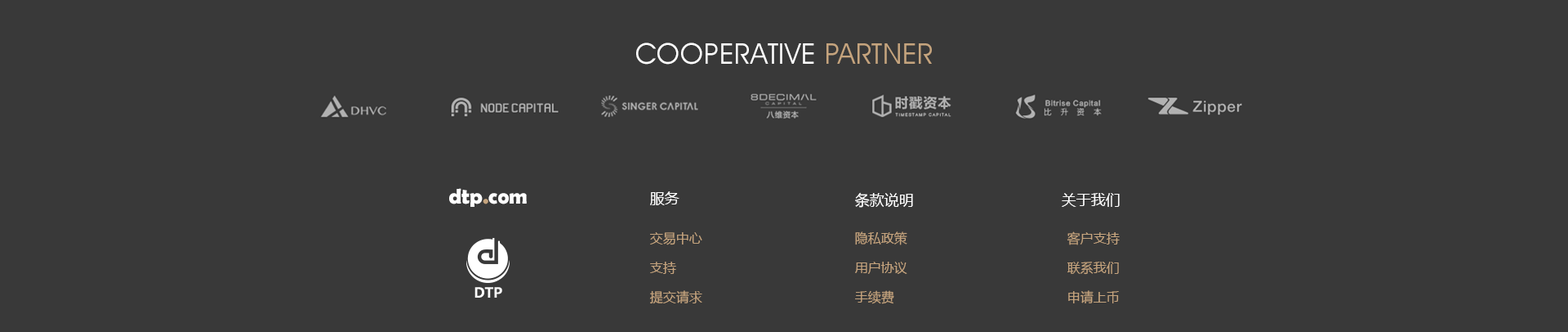
<style>
.page{position:relative;width:1568px;height:332px;background:#393939}
.page>*{position:absolute;margin:0}
.t1{font:28.6px "AvantGardeITCbyBT-Book";letter-spacing:0.02em;color:#ffffff;text-transform:uppercase}
.t2{font:28.6px "AvantGardeITCbyBT-Book";letter-spacing:0.02em;color:#c5a47e;text-transform:uppercase}
.t3{font:21.4px "BerlinSansFBDemi-Bold";color:#ffffff}
.t4{font:21.4px "BerlinSansFBDemi-Bold";color:#c5a47e}
.t5{font:14.7px "MicrosoftYaHei";color:#ffffff}
.t6{font:13.1px "MicrosoftYaHei";color:#c5a47e}
.t7{font:14.9px "Ebrima-Bold";color:#ffffff}
</style>
<div class="page">
<p class="t1" style="left:636px;top:42px;width:296px;height:23px">Cooperative <span class="t2">partner</span></p>
<p class="t3" style="left:449px;top:188px;width:78px;height:19px">dtp<span class="t4">.</span>com</p>
<p class="t5" style="left:650px;top:191px;width:29px;height:14px">服务</p>
<p class="t5" style="left:855px;top:192px;width:58px;height:15px">条款说明</p>
<p class="t5" style="left:1062px;top:193px;width:58px;height:14px">关于我们</p>
<p class="t6" style="left:650px;top:232px;width:52px;height:13px">交易中心</p>
<p class="t6" style="left:855px;top:231px;width:52px;height:14px">隐私政策</p>
<p class="t6" style="left:1067px;top:231px;width:53px;height:14px">客户支持</p>
<p class="t6" style="left:650px;top:261px;width:26px;height:13px">支持</p>
<p class="t6" style="left:855px;top:261px;width:52px;height:13px">用户协议</p>
<p class="t6" style="left:1067px;top:261px;width:52px;height:13px">联系我们</p>
<p class="t7" style="left:474px;top:287px;width:28px;height:10px">DTP</p>
<p class="t6" style="left:650px;top:290px;width:52px;height:14px">提交请求</p>
<p class="t6" style="left:855px;top:290px;width:39px;height:14px">手续费</p>
<p class="t6" style="left:1068px;top:290px;width:51px;height:13px">申请上币</p>
</div>
